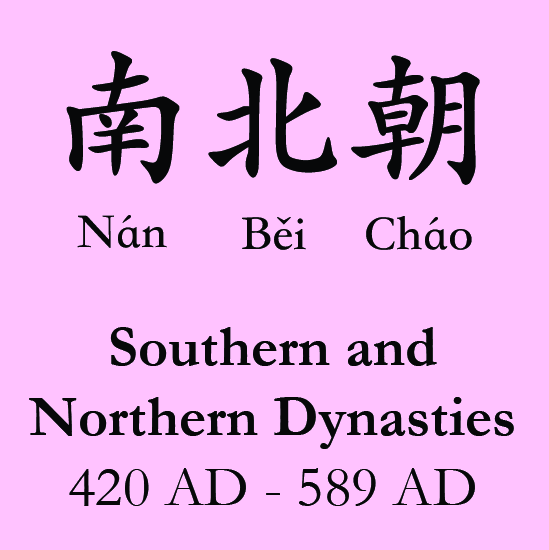
<style>
.page{position:relative;width:549px;height:550px;background:#ffc2ff}
.page>*{position:absolute;margin:0}
.t1{font:150px "STKaiti-SC-Bold";color:#070809}
.t2{font:50px "STKaiti-SC-Bold";color:#070809}
.t3{font:58.3px "Garamond-Bold";color:#070809}
.t4{font:58.3px "Garamond";color:#070809}
</style>
<div class="page">
<p class="t1" style="left:66px;top:51px;width:414px;height:134px">南北朝</p>
<p class="t2" style="left:77px;top:215px;width:90px;height:33px">Nán</p>
<p class="t2" style="left:242px;top:217px;width:64px;height:33px">Běi</p>
<p class="t2" style="left:366px;top:216px;width:106px;height:34px">Cháo</p>
<p class="t3" style="left:29px;top:327px;width:485px;height:179px;text-align:center">Southern and<br>Northern Dynasties<br><span class="t4">420 AD - 589 AD</span></p>
</div>
